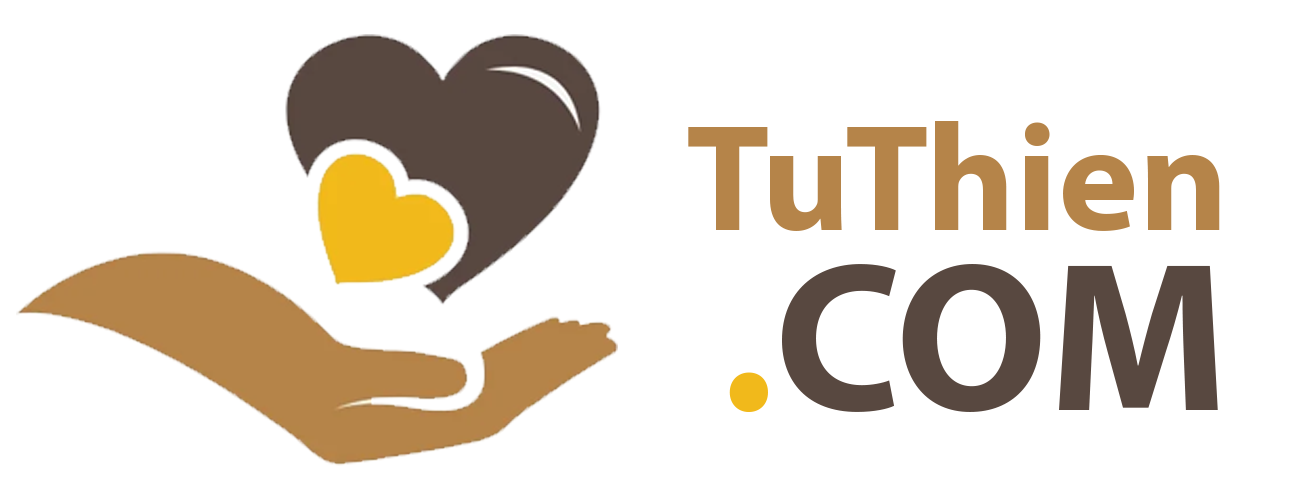
<style>
.page{position:relative;width:1300px;height:500px;background:#ffffff}
.page>*{position:absolute;margin:0}
.t1{font:152.8px "MyriadPro-Bold";color:#b58449}
.t2{font:213.2px "MyriadPro-Bold";color:#584840}
.t3{font:213.2px "MyriadPro-Bold";color:#f1b91b}
</style>
<div class="page">
<p class="t1" style="left:688px;top:121px;width:532px;height:110px">TuThien</p>
<p class="t2" style="left:729px;top:264px;width:489px;height:148px"><span class="t3">.</span>COM</p>
</div>
